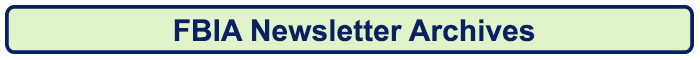
<style>
.page{position:relative;width:700px;height:60px;background:#e1f3c9}
.page>*{position:absolute;margin:0}
.t1{font:30px "Arial-BoldMT";color:#0a2064}
</style>
<div class="page">
<p class="t1" style="left:174px;top:19px;width:361px;height:23px">FBIA Newsletter Archives</p>
</div>
